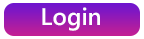
<style>
.page{position:relative;width:144px;height:39px;background:#ffffff}
.page>*{position:absolute;margin:0}
.t1{font:23.9px "YuGothicUI-Semibold";color:#ffffff}
</style>
<div class="page">
<p class="t1" style="left:42px;top:7px;width:58px;height:24px">Login</p>
</div>
